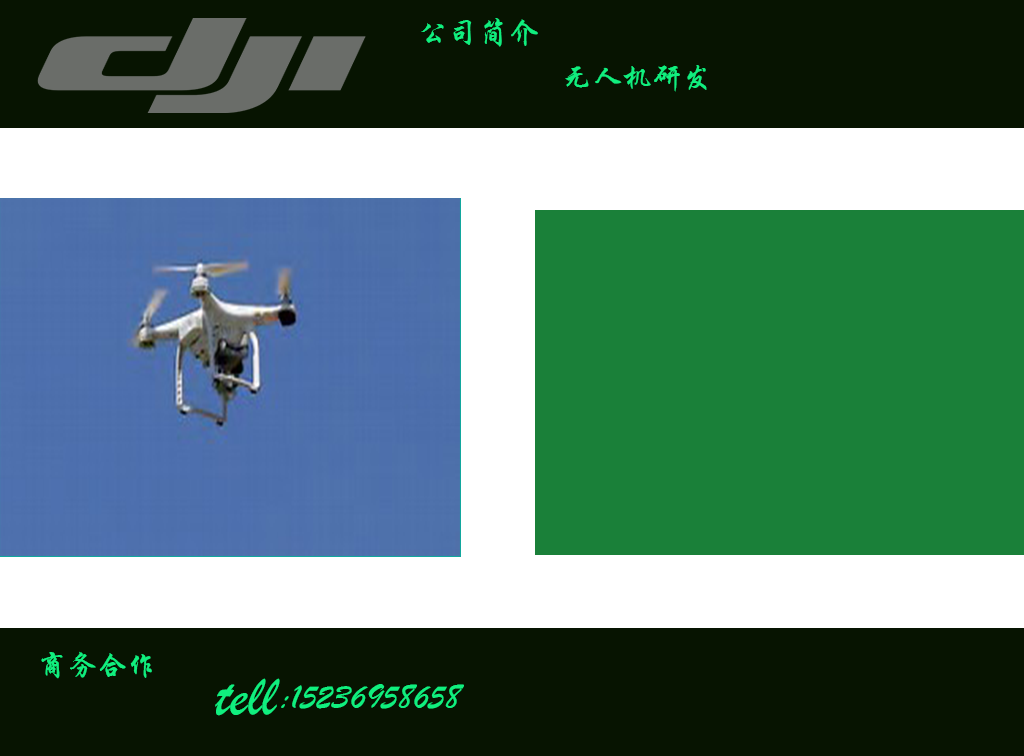
<style>
.page{position:relative;width:1024px;height:756px;background:#071401}
.page>*{position:absolute;margin:0}
.t1{font:30px "STXingkai";color:#10ef7e}
.t2{font:60px "STXingkai";color:#10ef7e}
.t3{font:36px "STXingkai";color:#10ef7e}
</style>
<div class="page">
<p class="t1" style="left:421px;top:18px;width:117px;height:29px">公司简介</p>
<p class="t1" style="left:565px;top:65px;width:142px;height:27px">无人机研发</p>
<p class="t1" style="left:41px;top:651px;width:111px;height:28px">商务合作</p>
<p class="t2" style="left:215px;top:678px;width:65px;height:38px">tell</p>
<p class="t3" style="left:281px;top:684px;width:183px;height:25px">:15236958658</p>
</div>
